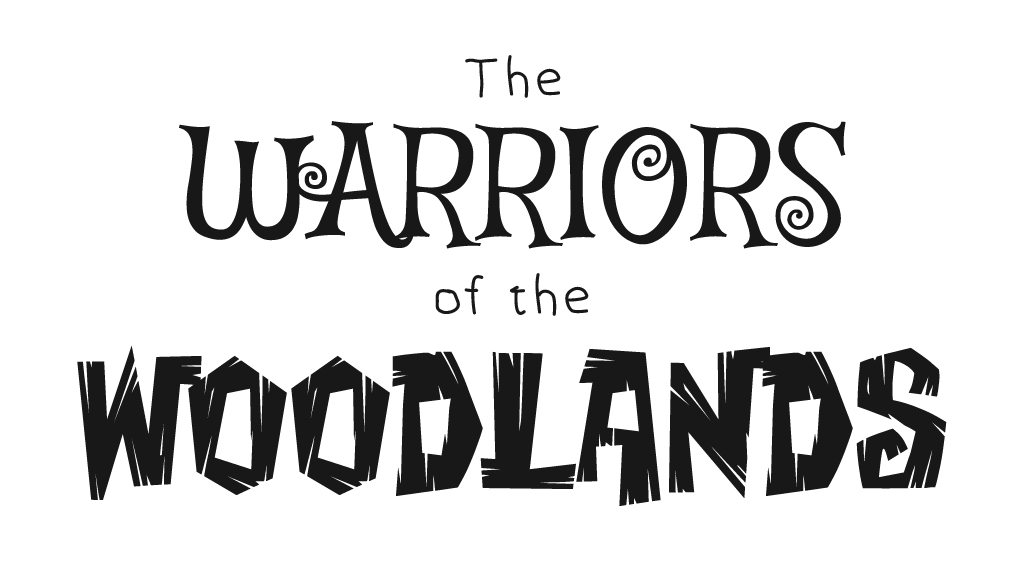
<style>
.page{position:relative;width:1024px;height:563px;background:#ffffff}
.page>*{position:absolute;margin:0}
.t1{font:60px "5yearsoldfont";color:#181818}
.t2{font:150px "MysteryQuest";color:#181818}
.t3{font:180px "CreakyFrank";letter-spacing:0.01em;color:#181818}
</style>
<div class="page">
<p class="t1" style="left:465px;top:55px;width:96px;height:43px">The</p>
<p class="t2" style="left:179px;top:121px;width:667px;height:128px">WARRIORS</p>
<p class="t1" style="left:435px;top:273px;width:154px;height:43px">of the</p>
<p class="t3" style="left:77px;top:345px;width:870px;height:161px"><span class="t2"> <br> </span>WOODLANDS</p>
</div>
